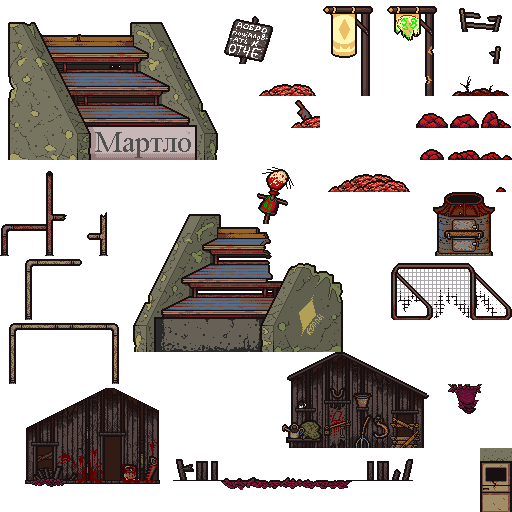
<style>
.page{position:relative;width:512px;height:512px;background:#ffffff}
.page>*{position:absolute;margin:0}
.t1{font:30px "TimesNewRomanPSMT";color:#505050}
</style>
<div class="page">
<p class="t1" style="left:95px;top:132px;width:96px;height:26px">Мартло</p>
</div>
